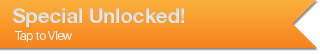
<style>
.page{position:relative;width:320px;height:54px}
.page>*{position:absolute;margin:0}
.t1{font:21px "HelveticaNeueLTPro-Bd";letter-spacing:-0.02em;color:#e9e9e9}
.t2{font:12px "HelveticaNeueLTPro-Lt";letter-spacing:-0.02em;color:#e9e9e9}
</style>
<div class="page">
<p class="t1" style="left:12px;top:8px;width:172px;height:19px">Special Unlocked!</p>
<p class="t2" style="left:14px;top:31px;width:58px;height:11px">Tap to View</p>
</div>
